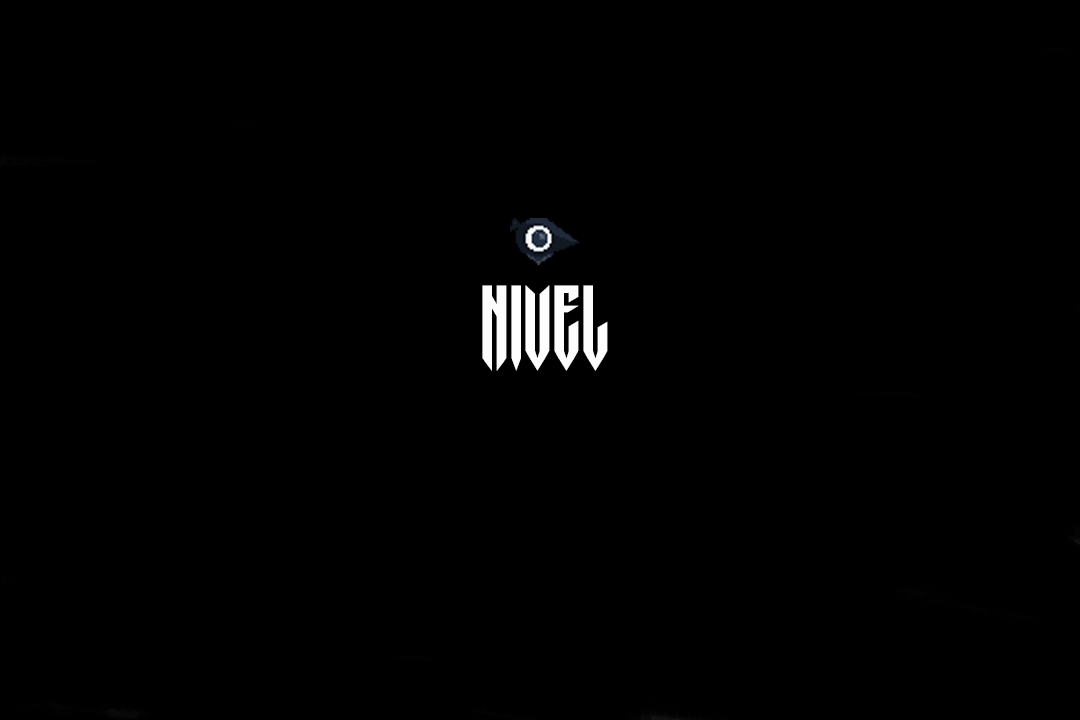
<style>
.page{position:relative;width:1080px;height:720px;background:#000000}
.page>*{position:absolute;margin:0}
.t1{font:72.7px "GamerockPersonalUse";color:#fefdfd}
</style>
<div class="page">
<p class="t1" style="left:482px;top:285px;width:126px;height:86px">NIVEL</p>
</div>
